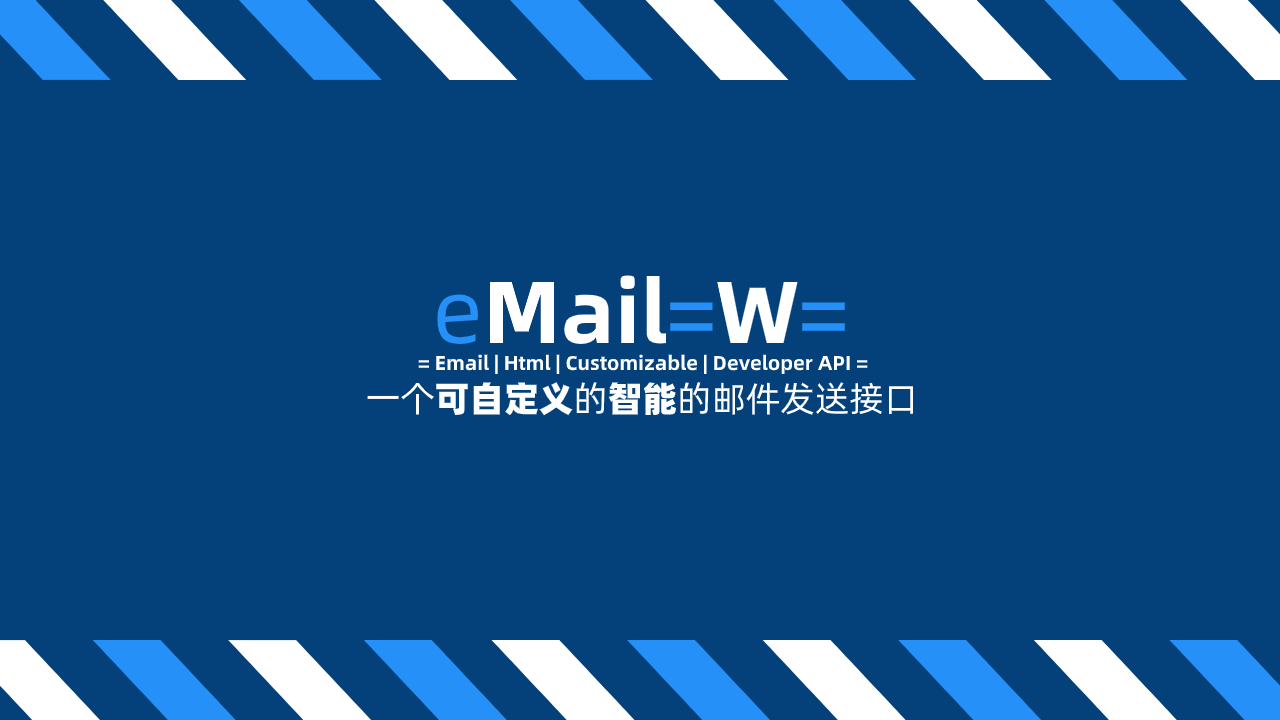
<style>
.page{position:relative;width:1280px;height:720px;background:#04417b}
.page>*{position:absolute;margin:0}
.t1{font:88px "AlibabaPuHuiTi-Bold";color:#ffffff}
.t2{font:88px "AlibabaPuHuiTi-Regular";color:#2490f8}
.t3{font:20px "AlibabaPuHuiTi-Bold";color:#ffffff}
.t4{font:35px "AlibabaPuHuiTi-Regular";color:#ffffff}
.t5{font:35px "AlibabaPuHuiTi-Heavy";color:#ffffff}
</style>
<div class="page">
<p class="t1" style="left:437px;top:275px;width:408px;height:69px"><span class="t2">e</span>Mail<span class="t2">=</span>W<span class="t2">=</span></p>
<p class="t3" style="left:418px;top:354px;width:450px;height:20px">= Email | Html | Customizable | Developer API =</p>
<p class="t4" style="left:367px;top:382px;width:546px;height:34px">一个<span class="t5">可自定义</span>的<span class="t5">智能</span>的邮件发送接口</p>
</div>
